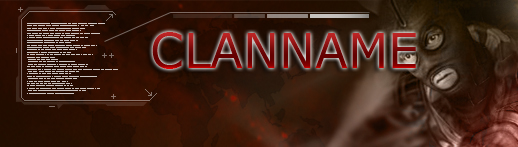
<style>
.page{position:relative;width:518px;height:147px}
.page>*{position:absolute;margin:0}
.t1{font:48px "Verdana"}
</style>
<div class="page">
<p class="t1" style="left:152px;top:32px;width:264px;height:37px">CLANNAME</p>
</div>
